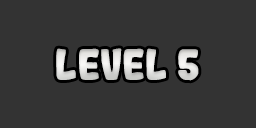
<style>
.page{position:relative;width:256px;height:128px;background:#333333}
.page>*{position:absolute;margin:0}
.t1{font:41.7px "Gogono-Cocoa-Mochi";color:#dedddb}
</style>
<div class="page">
<p class="t1" style="left:56px;top:48px;width:143px;height:33px">LEVEL 5</p>
</div>
